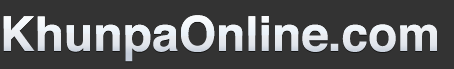
<style>
.page{position:relative;width:454px;height:69px;background:#333333}
.page>*{position:absolute;margin:0}
.t1{font:48px "Helvetica-Bold";color:#e8ebf0}
</style>
<div class="page">
<p class="t1" style="left:3px;top:15px;width:434px;height:47px">KhunpaOnline.com</p>
</div>
